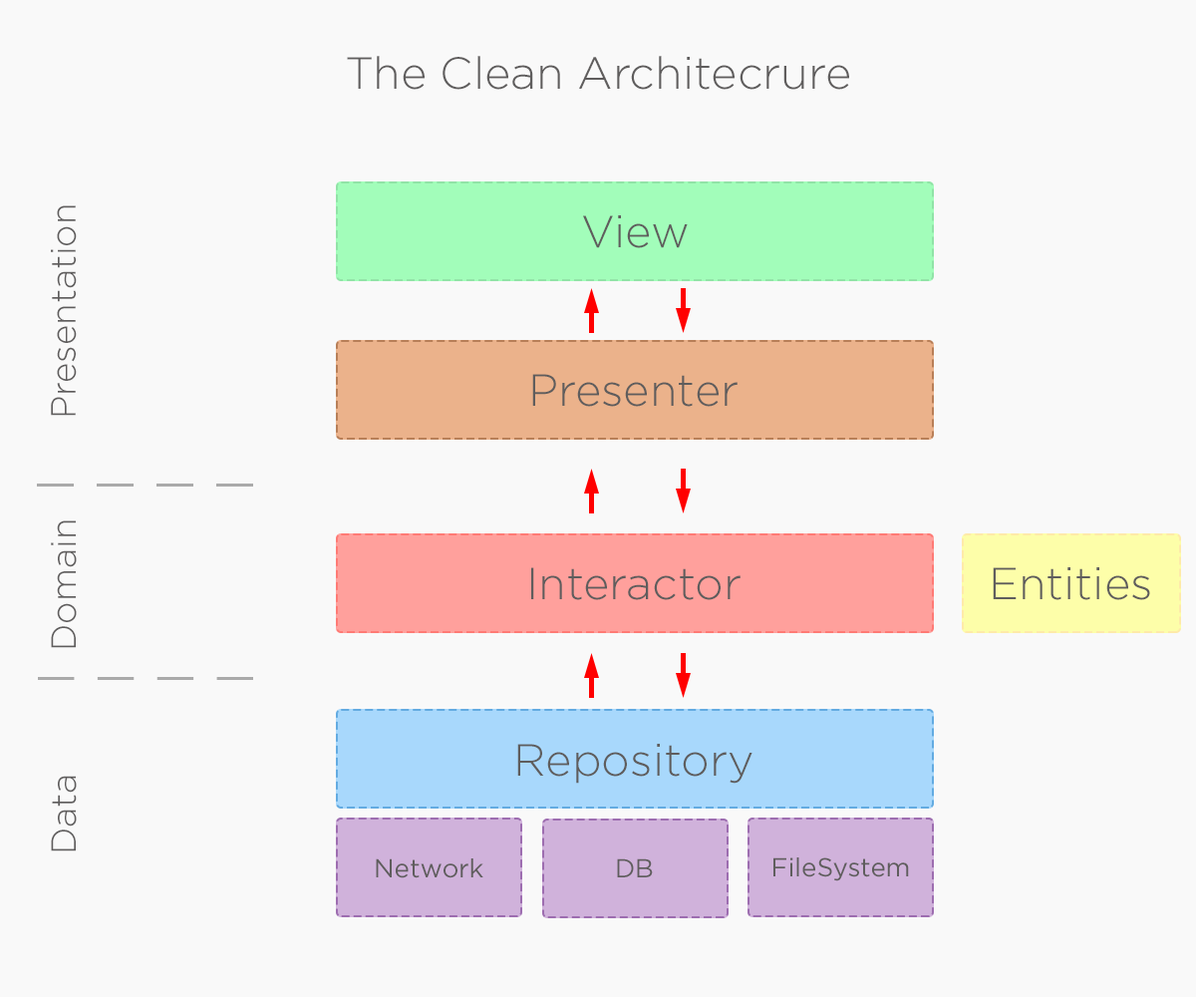
<style>
.page{position:relative;width:1196px;height:997px;background:#f9f9f9}
.page>*{position:absolute;margin:0}
.t1{font:44.9px "GothamPro-Light";color:#5f5d5d}
.t2{font:34.9px "GothamPro-Light";color:#5f5d5d}
.t3{font:44.8px "GothamPro-Light";color:#5f5d5d}
.t4{font:25.9px "GothamPro";color:#5f5d5d}
</style>
<div class="page">
<p class="t1" style="left:347px;top:56px;width:502px;height:34px">The Clean Architecrure</p>
<p class="t2" style="left:51px;top:205px;width:26px;height:211px;rotate:-90deg">Presentation</p>
<p class="t1" style="left:583px;top:215px;width:105px;height:33px">View</p>
<p class="t1" style="left:532px;top:374px;width:206px;height:33px">Presenter</p>
<p class="t2" style="left:51px;top:520px;width:26px;height:128px;rotate:-90deg">Domain</p>
<p class="t3" style="left:531px;top:567px;width:210px;height:33px">Interactor</p>
<p class="t3" style="left:993px;top:567px;width:157px;height:33px">Entities</p>
<p class="t1" style="left:517px;top:744px;width:236px;height:40px">Repository</p>
<p class="t2" style="left:51px;top:776px;width:26px;height:75px;rotate:-90deg">Data</p>
<p class="t4" style="left:774px;top:857px;width:135px;height:24px">FileSystem</p>
<p class="t4" style="left:376px;top:858px;width:107px;height:20px">Network</p>
<p class="t4" style="left:617px;top:858px;width:36px;height:19px">DB</p>
</div>
